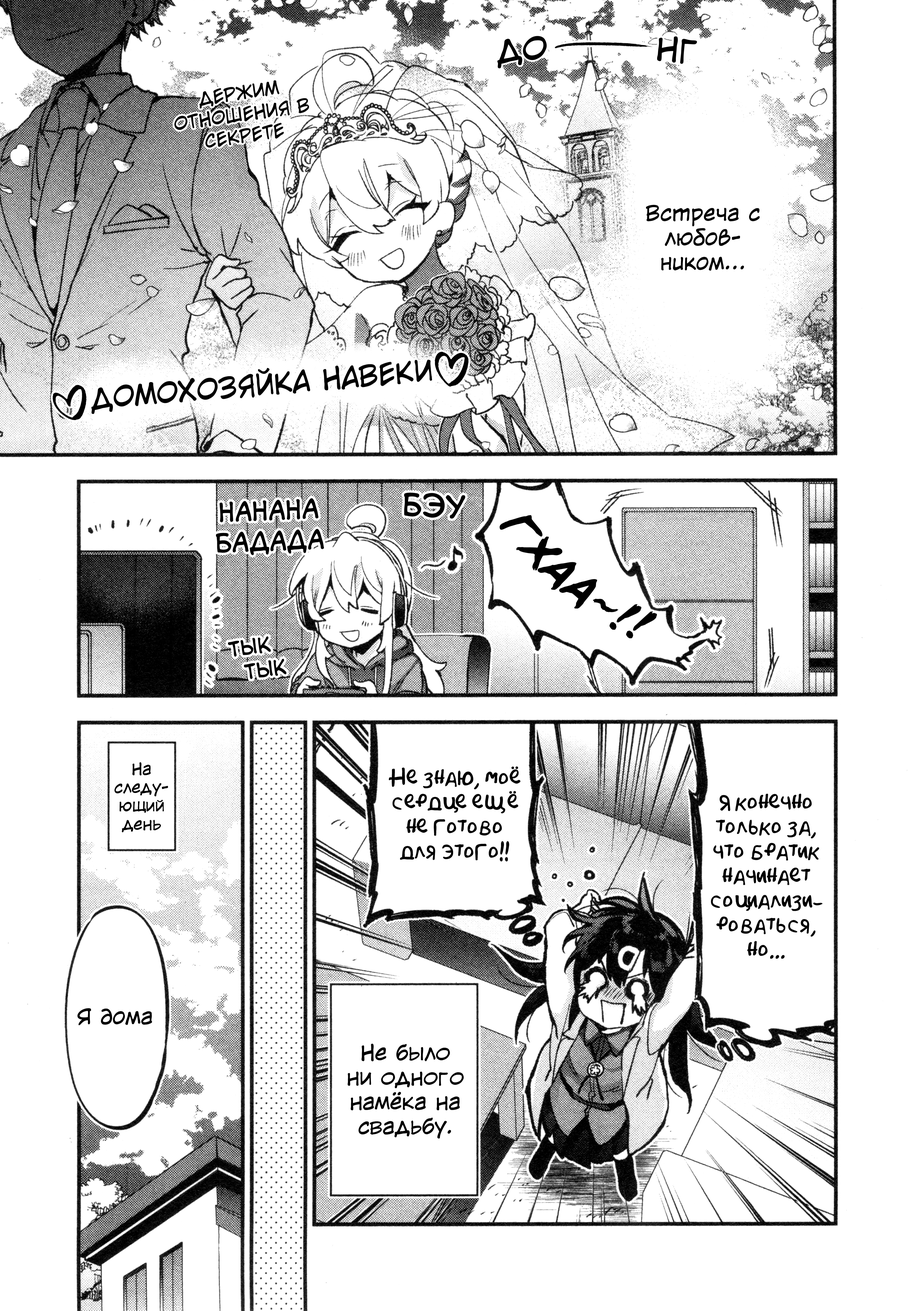
<style>
.page{position:relative;width:909px;height:1311px;background:#ffffff}
.page>*{position:absolute;margin:0}
.t1{font:30.7px "CCWildWordsLower-Regular";letter-spacing:0.006em;color:#000000;text-transform:uppercase}
.t2{font:17.9px "CCWildWordsLower-Regular";letter-spacing:0.006em;color:#000000;text-transform:uppercase}
.t3{font:20.5px "v_CCWildWordsLower";letter-spacing:0.006em;color:#000000}
.t4{font:28.1px "CCWildWordsLower-Regular";letter-spacing:0.006em;color:#000000;text-transform:uppercase}
.t5{font:30.7px "v_CCMonologous";letter-spacing:0.006em;color:#000000;text-transform:uppercase}
.t6{font:30.7px "v_CCMonologous";letter-spacing:0.006em;color:#000000}
.t7{font:25.6px "v_CCMonologous";letter-spacing:0.006em;color:#000000;text-transform:uppercase}
.t8{font:40.9px "d_CCTimSaleBrush-Italic";letter-spacing:0.006em;color:#000000;text-transform:uppercase}
.t9{font:20.5px "v_CCMonologous";letter-spacing:0.006em;color:#000000;text-transform:uppercase}
.t10{font:15.3px "CCWildWordsLower-Regular";letter-spacing:0.006em;color:#000000}
.t11{font:20.5px "AkbarPlain";letter-spacing:0.006em;color:#000000}
.t12{font:20.5px "CCWildWordsLower-Regular";letter-spacing:0.006em;color:#000000}
</style>
<div class="page">
<p class="t1" style="left:498px;top:36px;width:199px;height:32px">ДО        нГ</p>
<p class="t2" style="left:174px;top:80px;width:135px;height:68px;rotate:-8deg">Держим отношения в секрете</p>
<p class="t3" style="left:646px;top:205px;width:114px;height:66px;text-align:center">Встреча с любов-<br>ником...</p>
<p class="t4" style="left:91px;top:360px;width:341px;height:54px;rotate:-5deg">Домохозяйка навеки</p>
<p class="t5" style="left:404px;top:493px;width:62px;height:26px;rotate:3deg">Б<span class="t6">э</span>у</p>
<p class="t7" style="left:216px;top:498px;width:108px;height:57px;text-align:center;rotate:-2deg">Нанана<br>Бадада</p>
<p class="t8" style="left:500px;top:515px;width:157px;height:123px;rotate:40deg">Гхаа~!!</p>
<p class="t9" style="left:228px;top:636px;width:59px;height:43px;text-align:center;rotate:-8deg">Тык<br>   Тык</p>
<p class="t10" style="left:114px;top:762px;width:54px;height:70px;text-align:center">На следу-ющий день</p>
<p class="t11" style="left:389px;top:766px;width:132px;height:96px;text-align:center">Не знаю, моё сердце ещё<br>не готово<br>для этого!!</p>
<p class="t11" style="left:711px;top:794px;width:112px;height:165px;text-align:center">Я конечно только за, что братик начинает социализи-<br>роваться, но...</p>
<p class="t3" style="left:77px;top:1008px;width:75px;height:17px">Я дома</p>
<p class="t12" style="left:348px;top:1044px;width:116px;height:95px;text-align:center">Не было<br>ни одного намёка на свадьбу.</p>
</div>
